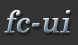
<style>
.page{position:relative;width:78px;height:45px;background:#333333}
.page>*{position:absolute;margin:0}
.t1{font:30px "CenturySchoolbook";font-weight:bold;font-style:italic}
</style>
<div class="page">
<p class="t1" style="left:4px;top:10px;width:67px;height:23px">fc-ui</p>
</div>
